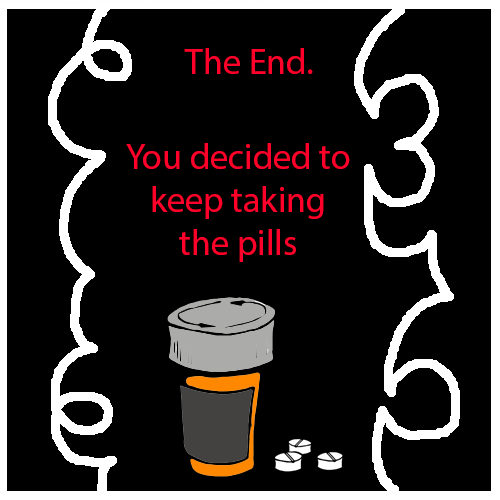
<style>
.page{position:relative;width:500px;height:500px;background:#000000}
.page>*{position:absolute;margin:0}
.t1{font:36px "MyriadPro-Regular";color:#ff002a}
</style>
<div class="page">
<p class="t1" style="left:184px;top:48px;width:129px;height:26px">The End.</p>
<p class="t1" style="left:126px;top:143px;width:224px;height:119px;text-align:center">You decided to keep taking the pills</p>
</div>
